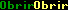
<style>
.page{position:relative;width:68px;height:10px;background:#000000}
.page>*{position:absolute;margin:0}
.t1{font:13.2px "Onesize";color:#009900;scale:0.91 1}
.t2{font:13.2px "Onesize";color:#ffff66;scale:0.91 1}
</style>
<div class="page">
<p class="t1" style="left:0px;top:1px;width:34px;height:8px">Obrir</p>
<p class="t2" style="left:34px;top:1px;width:34px;height:8px">Obrir</p>
</div>
